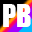
<style>
.page{position:relative;width:32px;height:32px;background:#ffffff}
.page>*{position:absolute;margin:0}
.t1{font:28.8px "Impact";color:#ffffff}
</style>
<div class="page">
<p class="t1" style="left:3px;top:4px;width:28px;height:23px">PB</p>
</div>
